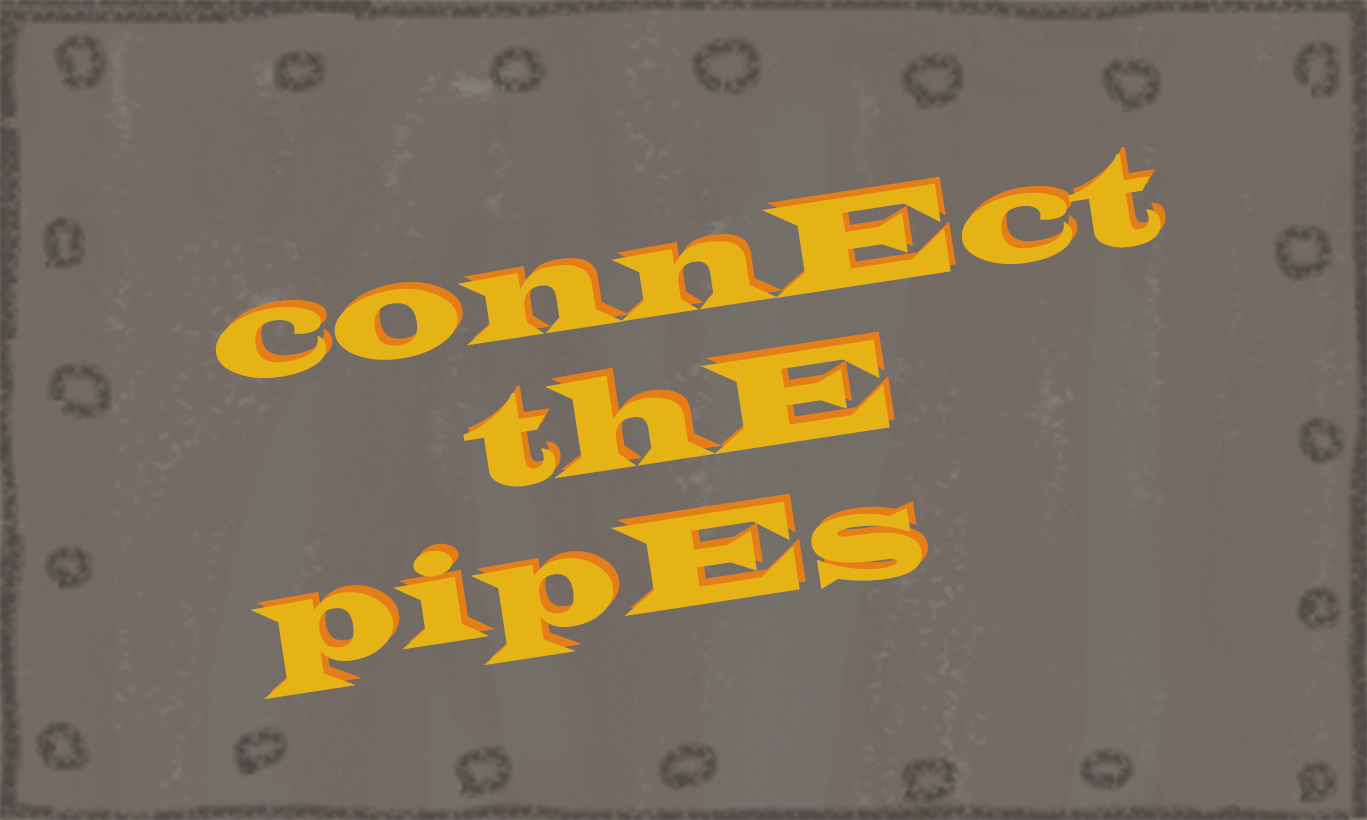
<style>
.page{position:relative;width:1367px;height:820px;background:#736b64}
.page>*{position:absolute;margin:0}
.t1{font:133px "LatinWide";letter-spacing:0.025em;color:#e6b317}
</style>
<div class="page">
<p class="t1" style="left:222px;top:147px;width:944px;height:224px;rotate:-9deg">connEct</p>
<p class="t1" style="left:216px;top:154px;width:945px;height:224px;rotate:-9deg">connEct</p>
<p class="t1" style="left:463px;top:339px;width:427px;height:148px;rotate:-9deg">thE</p>
<p class="t1" style="left:468px;top:331px;width:427px;height:149px;rotate:-9deg">thE</p>
<p class="t1" style="left:257px;top:493px;width:671px;height:199px;rotate:-9deg">pipEs</p>
<p class="t1" style="left:251px;top:501px;width:671px;height:198px;rotate:-9deg">pipEs</p>
</div>
